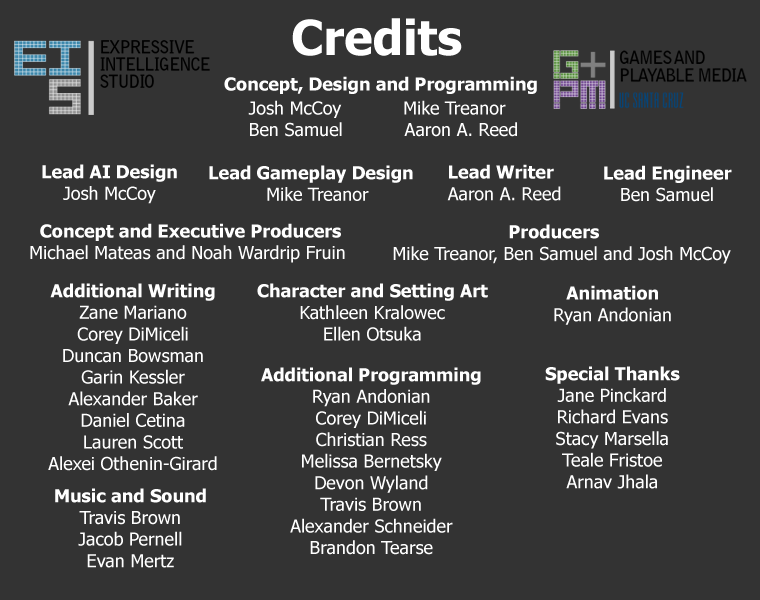
<style>
.page{position:relative;width:760px;height:600px;background:#333333}
.page>*{position:absolute;margin:0}
.t1{font:48px "Tahoma-Bold";color:#ffffff}
.t2{font:18px "Tahoma-Bold";color:#ffffff}
.t3{font:18px "Tahoma";color:#ffffff}
</style>
<div class="page">
<p class="t1" style="left:292px;top:18px;width:170px;height:38px">Credits</p>
<p class="t2" style="left:224px;top:76px;width:313px;height:18px">Concept, Design and Programming</p>
<p class="t3" style="left:248px;top:100px;width:269px;height:37px">Josh McCoy           Mike Treanor<br>Ben Samuel           Aaron A. Reed</p>
<p class="t2" style="left:42px;top:164px;width:135px;height:40px;text-align:center">Lead AI Design<br><span class="t3">Josh McCoy</span></p>
<p class="t2" style="left:209px;top:165px;width:204px;height:36px">Lead Gameplay Design<br>           <span class="t3">Mike Treanor</span></p>
<p class="t3" style="left:447px;top:164px;width:114px;height:37px"><span class="t2">Lead Writer<br></span>Aaron A. Reed</p>
<p class="t2" style="left:604px;top:165px;width:128px;height:37px">Lead Engineer<br><span class="t3">   Ben Samuel</span></p>
<p class="t3" style="left:30px;top:223px;width:315px;height:40px"><span class="t2">  Concept and Executive Producers<br></span>Michael Mateas and Noah Wardrip Fruin</p>
<p class="t3" style="left:393px;top:224px;width:338px;height:40px"><span class="t2">                      Producers<br></span>Mike Treanor, Ben Samuel and Josh McCoy</p>
<p class="t3" style="left:48px;top:283px;width:169px;height:188px;text-align:center"><span class="t2">Additional Writing</span><br>Zane Mariano<br>Corey DiMiceli<br>Duncan Bowsman<br>Garin Kessler<br>Alexander Baker<br>Daniel Cetina<br>Lauren Scott<br>Alexei Othenin-Girard</p>
<p class="t3" style="left:257px;top:283px;width:231px;height:58px;text-align:center"><span class="t2">Character and Setting Art<br></span>Kathleen Kralowec<br>Ellen Otsuka</p>
<p class="t3" style="left:554px;top:285px;width:117px;height:40px;text-align:center"><span class="t2">Animation<br></span>Ryan Andonian</p>
<p class="t3" style="left:545px;top:366px;width:135px;height:123px;text-align:center"><span class="t2">Special Thanks<br></span>Jane Pinckard<br>Richard Evans<br>Stacy Marsella<br>Teale Fristoe<br>Arnav Jhala</p>
<p class="t3" style="left:261px;top:367px;width:220px;height:188px;text-align:center"><span class="t2">Additional Programming<br></span>Ryan Andonian<br>Corey DiMiceli<br>Christian Ress<br>Melissa Bernetsky<br>Devon Wyland<br>Travis Brown<br>Alexander Schneider<br>Brandon Tearse</p>
<p class="t3" style="left:55px;top:488px;width:151px;height:80px;text-align:center"><span class="t2">Music and Sound<br></span>Travis Brown<br>Jacob Pernell<br>Evan Mertz</p>
</div>
